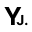
<style>
.page{position:relative;width:32px;height:32px;background:#ffffff}
.page>*{position:absolute;margin:0}
.t1{font:25.6px "Pretendard-Bold";color:#000000;text-transform:uppercase}
.t2{font:14px "Pretendard-Bold";color:#000000;text-transform:uppercase}
</style>
<div class="page">
<p class="t1" style="left:4px;top:7px;width:18px;height:18px">Y</p>
<p class="t2" style="left:16px;top:14px;width:12px;height:12px">J.</p>
</div>
